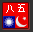
<style>
.page{position:relative;width:33px;height:32px;background:#f20000}
.page>*{position:absolute;margin:0}
.t1{font:10.4px "SimSun";color:#ffffff}
</style>
<div class="page">
<p class="t1" style="left:6px;top:4px;width:19px;height:9px">八五</p>
</div>
